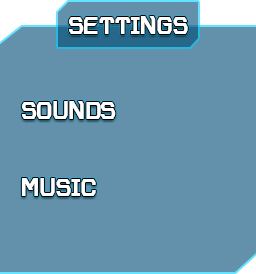
<style>
.page{position:relative;width:256px;height:274px;background:#6391ab}
.page>*{position:absolute;margin:0}
.t1{font:24px "VoyagerGrotesqueBold";color:#ffffff}
</style>
<div class="page">
<p class="t1" style="left:68px;top:16px;width:120px;height:18px">SETTINGS</p>
<p class="t1" style="left:21px;top:101px;width:95px;height:18px">SOUNDS</p>
<p class="t1" style="left:21px;top:178px;width:75px;height:18px">MUSIC</p>
</div>
